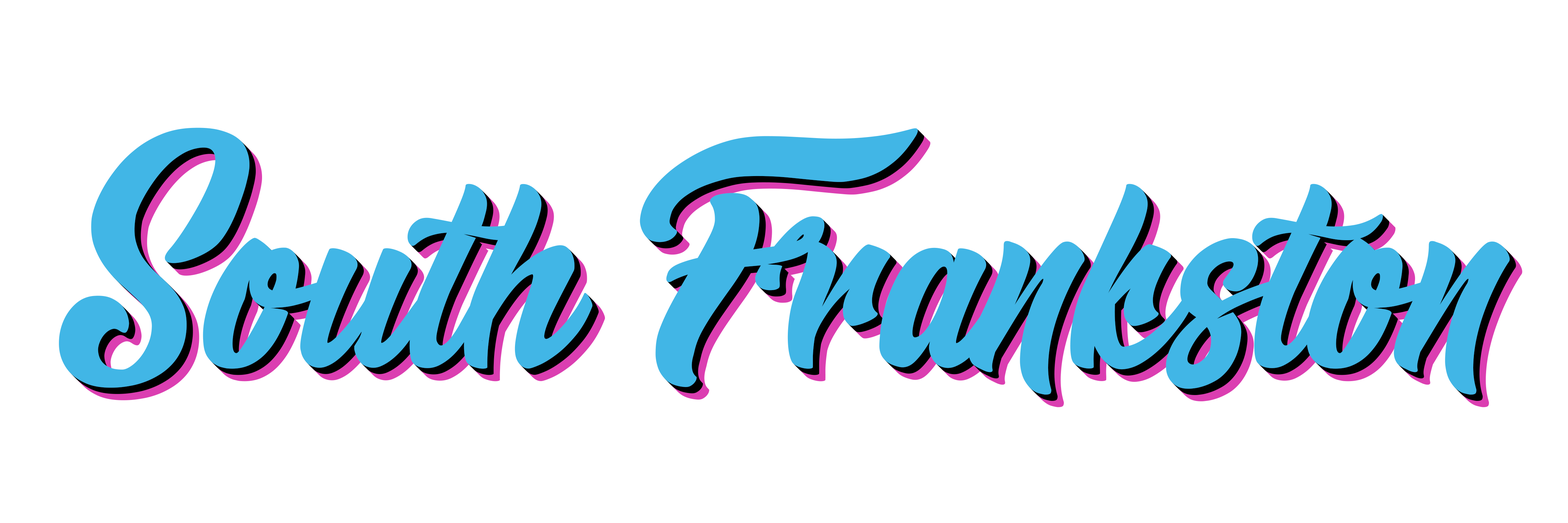
<style>
.page{position:relative;width:1568px;height:523px;background:#ffffff}
.page>*{position:absolute;margin:0}
.t1{font:217.8px "MasterofComicsPersonalUse";color:#41b6e6}
</style>
<div class="page">
<p class="t1" style="left:59px;top:128px;width:1451px;height:266px">South Frankston</p>
</div>
